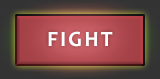
<style>
.page{position:relative;width:160px;height:79px}
.page>*{position:absolute;margin:0}
.t1{font:22px "Candara-Bold";letter-spacing:0.1em;color:#ffffff}
</style>
<div class="page">
<p class="t1" style="left:48px;top:31px;width:65px;height:16px">FIGHT</p>
<p class="t1" style="left:48px;top:31px;width:65px;height:16px">FIGHT</p>
<p class="t1" style="left:48px;top:31px;width:65px;height:16px">FIGHT</p>
</div>
